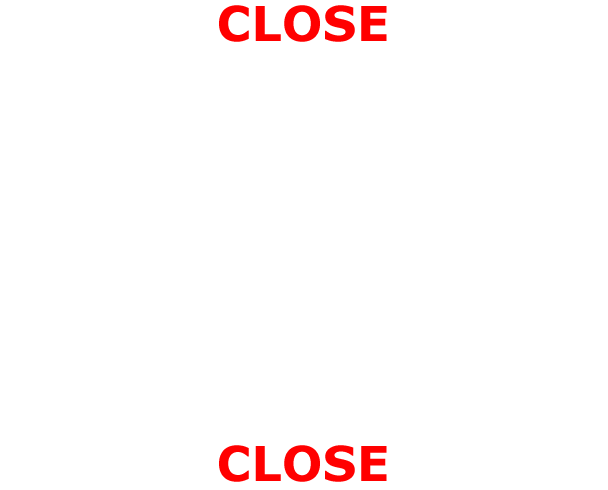
<style>
.page{position:relative;width:608px;height:490px;background:#ffffff}
.page>*{position:absolute;margin:0}
.t1{font:48px "Verdana-Bold";color:#ff0000}
</style>
<div class="page">
<p class="t1" style="left:219px;top:5px;width:168px;height:37px">CLOSE</p>
<p class="t1" style="left:219px;top:445px;width:168px;height:37px">CLOSE</p>
</div>
